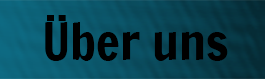
<style>
.page{position:relative;width:265px;height:79px}
.page>*{position:absolute;margin:0}
.t1{font:50px "FrancoisOne-Regular";color:#000000}
</style>
<div class="page">
<p class="t1" style="left:45px;top:15px;width:183px;height:46px">Über uns</p>
</div>
